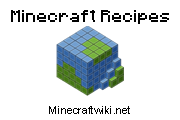
<style>
.page{position:relative;width:180px;height:120px;background:#ffffff}
.page>*{position:absolute;margin:0}
.t1{font:14px "Minecraft";color:#010101}
.t2{font:11px "ArialMT";color:#010101}
</style>
<div class="page">
<p class="t1" style="left:11px;top:10px;width:158px;height:14px">Minecraft Recipes</p>
<p class="t2" style="left:49px;top:106px;width:81px;height:8px">Minecraftwiki.net</p>
</div>
